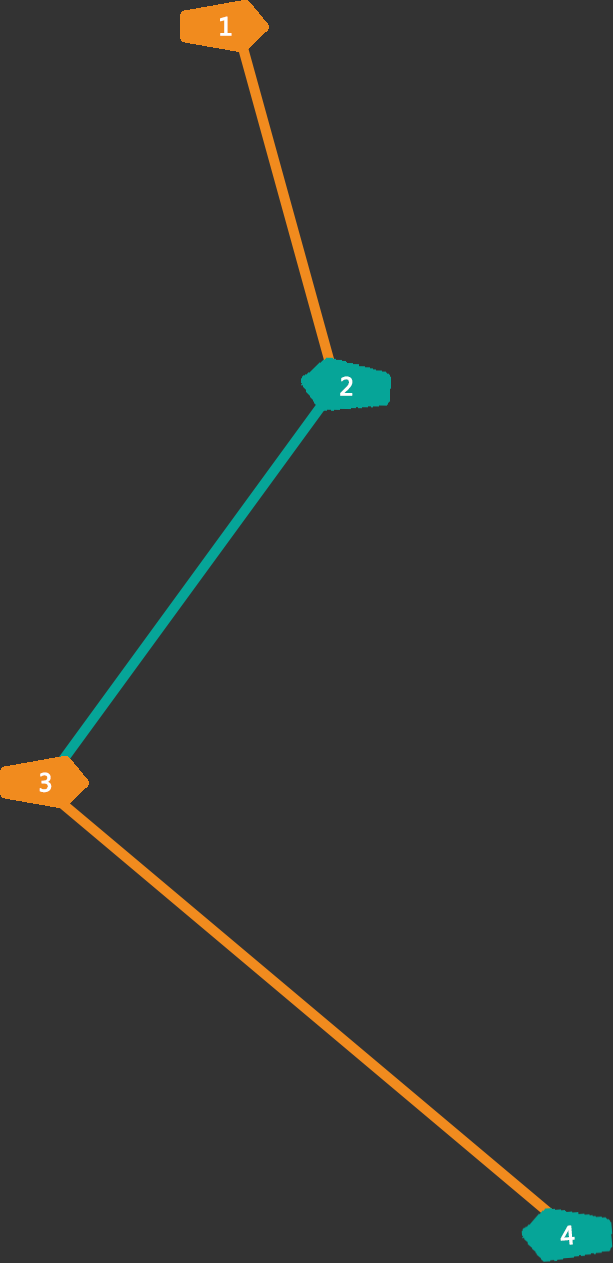
<style>
.page{position:relative;width:613px;height:1263px;background:#333333}
.page>*{position:absolute;margin:0}
.t1{font:24px "MicrosoftYaHei";color:#feffff;font-weight:bold}
</style>
<div class="page">
<p class="t1" style="left:220px;top:16px;width:12px;height:20px">1</p>
<p class="t1" style="left:340px;top:376px;width:13px;height:20px">2</p>
<p class="t1" style="left:39px;top:772px;width:13px;height:21px">3</p>
<p class="t1" style="left:560px;top:1225px;width:15px;height:20px;rotate:-5deg">4</p>
</div>
